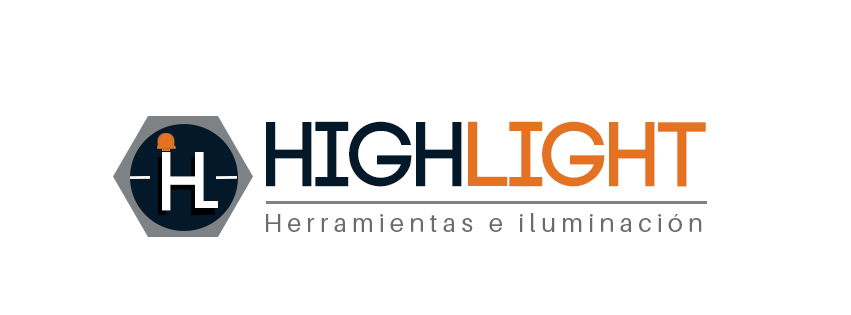
<style>
.page{position:relative;width:851px;height:315px;background:#ffffff}
.page>*{position:absolute;margin:0}
.t1{font:91.3px "Code-Bold";color:#e37222}
.t2{font:91.3px "Code-Bold";color:#031929}
.t3{font:82.4px "Code-Bold";color:#ffffff}
.t4{font:25.6px "Aileron-Regular";letter-spacing:0.2em;color:#6c6b69}
</style>
<div class="page">
<p class="t1" style="left:266px;top:121px;width:440px;height:66px"><span class="t2">HIGH</span>LIGHT</p>
<p class="t3" style="left:162px;top:152px;width:42px;height:59px">h</p>
<p class="t4" style="left:266px;top:213px;width:436px;height:19px">Herramientas e iluminación</p>
</div>
